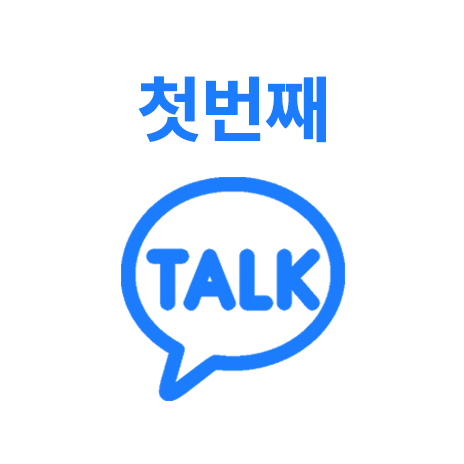
<style>
.page{position:relative;width:464px;height:464px;background:#ffffff}
.page>*{position:absolute;margin:0}
.t1{font:73.2px "Pretendard-Bold";color:#1c7cfe;font-weight:bold}
</style>
<div class="page">
<p class="t1" style="left:138px;top:76px;width:188px;height:67px">첫번째</p>
</div>
